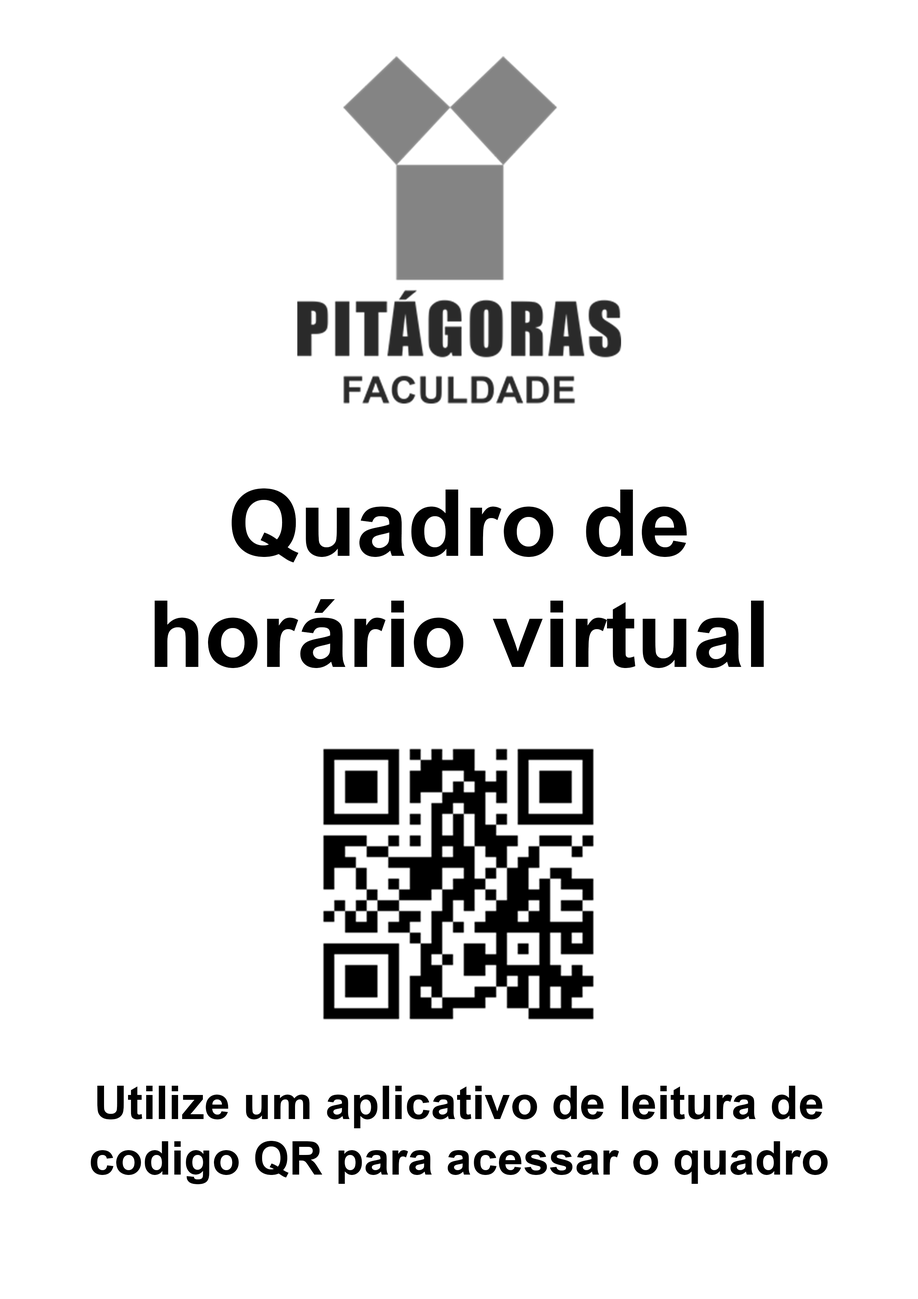
<style>
.page{position:relative;width:918px;height:1299px;background:#ffffff}
.page>*{position:absolute;margin:0}
.t1{font:92.6px "Arial-BoldMT";color:#000000}
.t2{font:46.3px "Arial-BoldMT";color:#000000}
</style>
<div class="page">
<p class="t1" style="left:154px;top:488px;width:610px;height:180px;text-align:center">Quadro de horário virtual</p>
<p class="t2" style="left:91px;top:1085px;width:737px;height:99px;text-align:center">Utilize um aplicativo de leitura de codigo QR para acessar o quadro</p>
</div>
